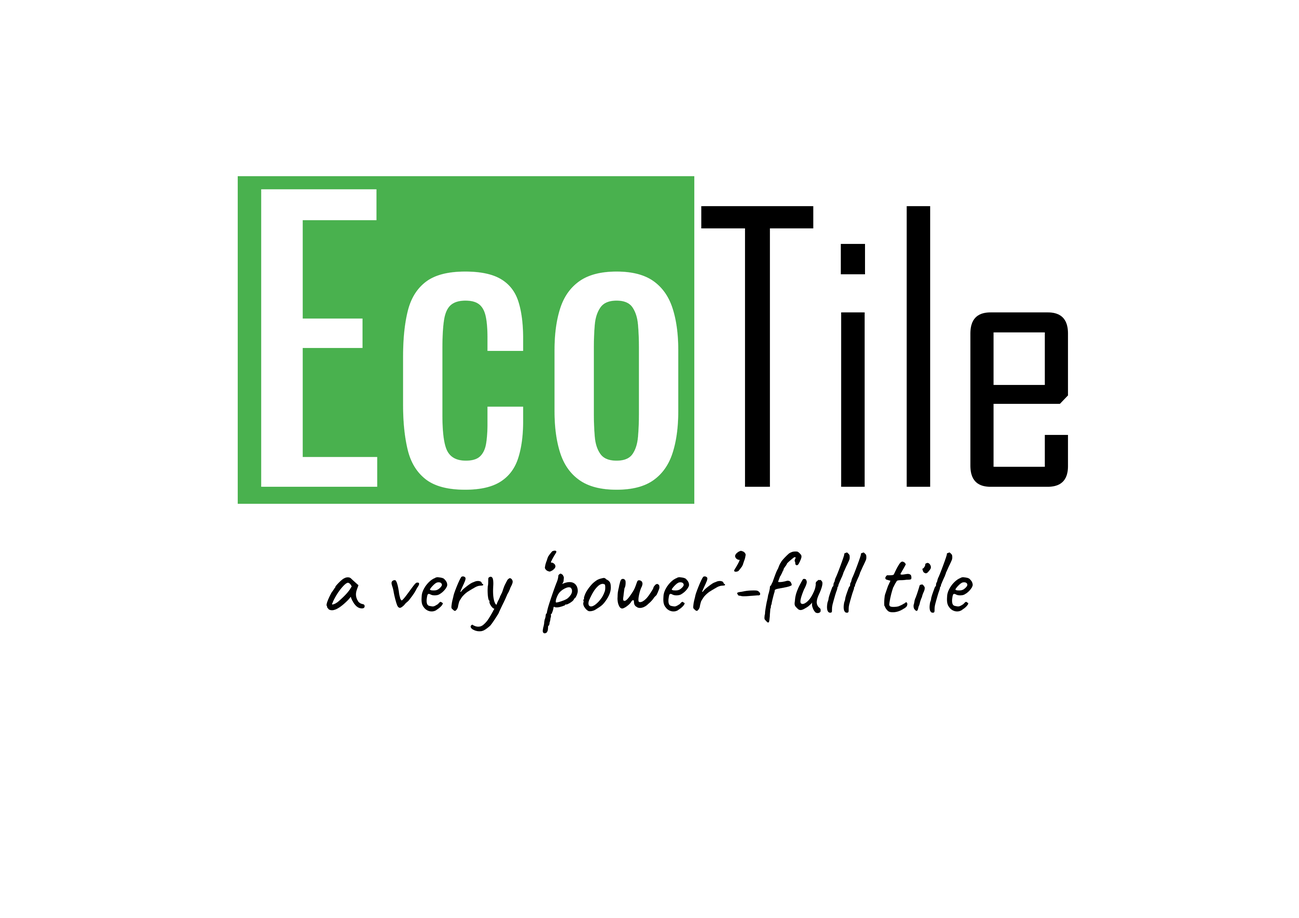
<style>
.page{position:relative;width:1299px;height:918px;background:#ffffff}
.page>*{position:absolute;margin:0}
.t1{font:91.9px "Caveat-Regular";color:#000000}
</style>
<div class="page">
<p class="t1" style="left:326px;top:551px;width:647px;height:82px">a very ‘power’-full tile</p>
</div>
